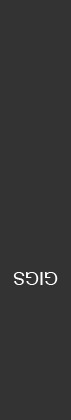
<style>
.page{position:relative;width:71px;height:420px;background:#333333}
.page>*{position:absolute;margin:0}
.t1{font:19.9px "Vrinda";color:#ffffff;text-transform:uppercase}
</style>
<div class="page">
<p class="t1" style="left:13px;top:272px;width:45px;height:13px;rotate:180deg">gigs</p>
</div>
